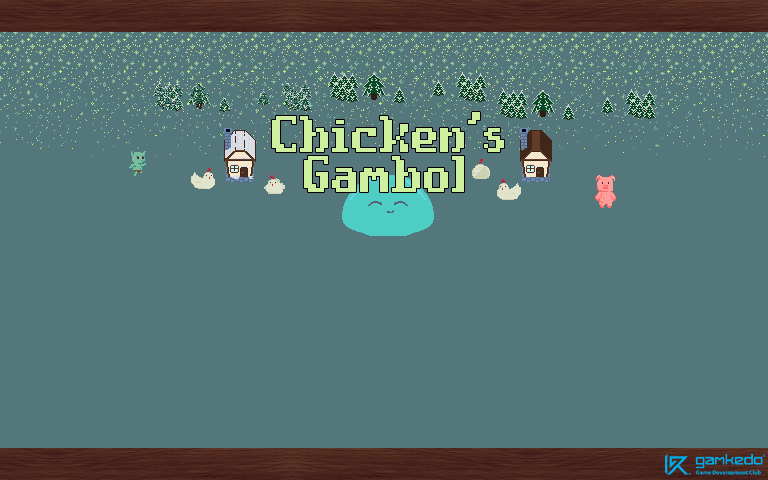
<style>
.page{position:relative;width:768px;height:480px;background:#53777a}
.page>*{position:absolute;margin:0}
.t1{font:64px "CompassPro";color:#cff09e}
</style>
<div class="page">
<p class="t1" style="left:272px;top:112px;width:232px;height:40px">Chicken's</p>
<p class="t1" style="left:304px;top:156px;width:160px;height:36px">Gambol</p>
</div>
